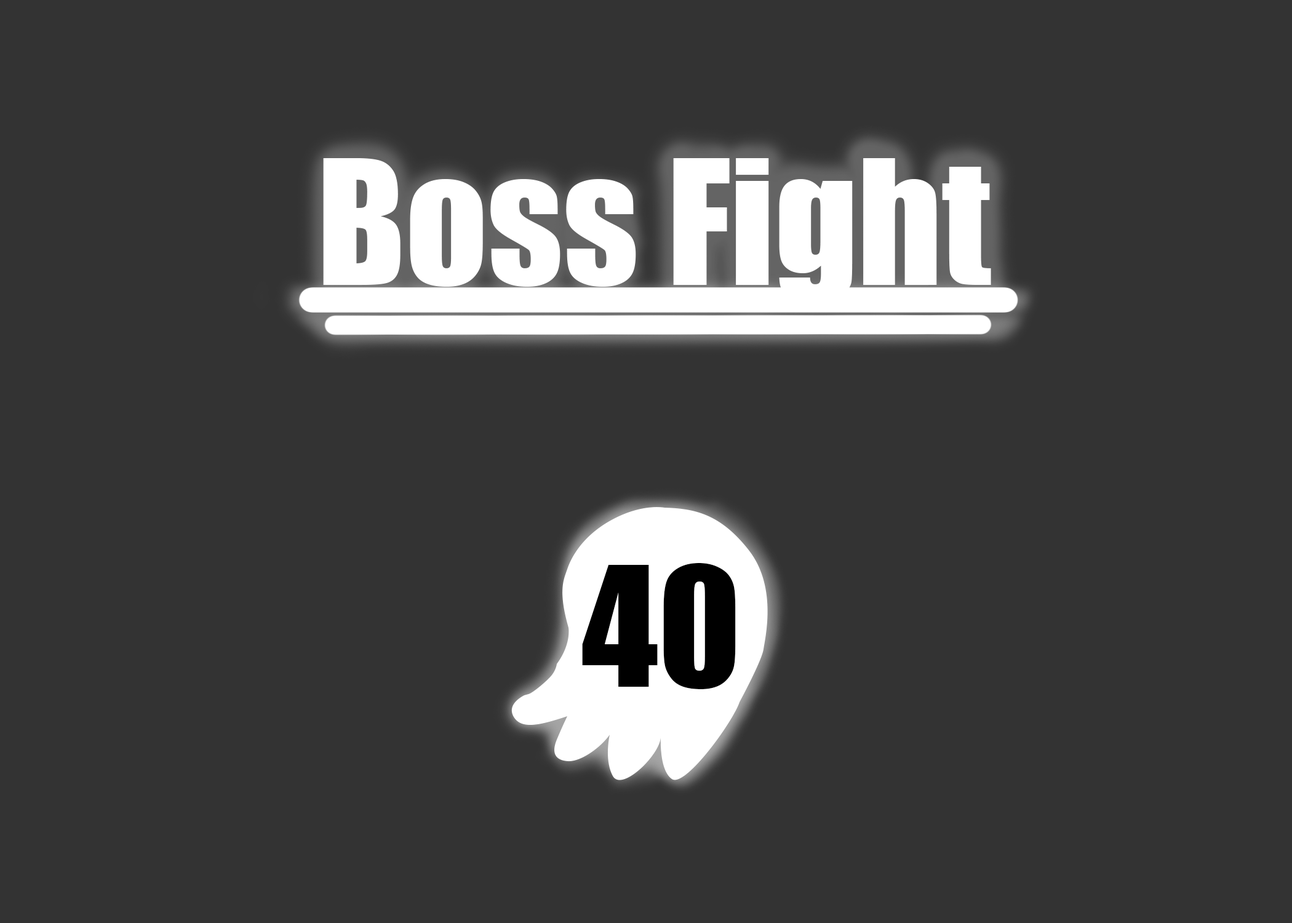
<style>
.page{position:relative;width:1292px;height:923px;background:#333333}
.page>*{position:absolute;margin:0}
.t1{font:160.5px "Impact";color:#ffffff}
.t2{font:153.8px "Impact";color:#000000}
</style>
<div class="page">
<p class="t1" style="left:323px;top:158px;width:668px;height:145px">Boss Fight</p>
<p class="t2" style="left:582px;top:563px;width:154px;height:126px">40</p>
</div>
